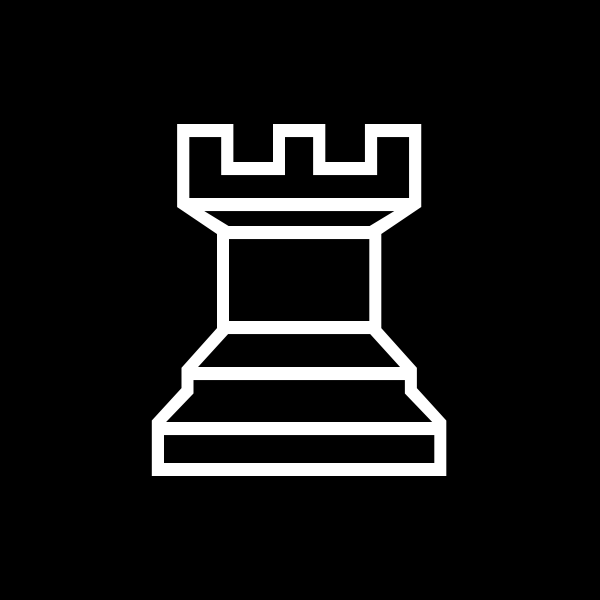
<style>
.page{position:relative;width:600px;height:600px;background:#000000}
.page>*{position:absolute;margin:0}
.t1{font:427.9px "ArialUnicodeMS";color:#ffffff}
</style>
<div class="page">
<p class="t1" style="left:151px;top:124px;width:296px;height:352px">♖</p>
</div>
